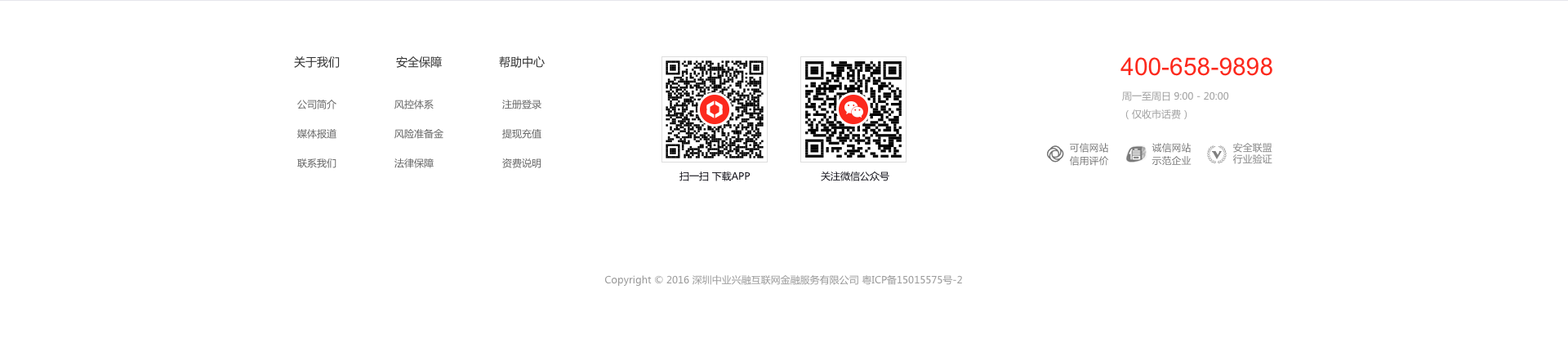
<style>
.page{position:relative;width:1568px;height:343px;background:#ffffff}
.page>*{position:absolute;margin:0}
.t1{font:11.4px "MicrosoftYaHei";color:#333333}
.t2{font:24.5px "ArialMT";color:#fc291d}
.t3{font:9.8px/29.4px "MicrosoftYaHei";color:#666666}
.t4{font:9.8px/18px "MicrosoftYaHei";color:#a0a0a0}
.t5{font:9.8px "MicrosoftYaHei";color:#121119}
.t6{font:9.8px "MicrosoftYaHei";color:#999999}
</style>
<div class="page">
<p class="t1" style="left:294px;top:56px;width:46px;height:12px">关于我们</p>
<p class="t1" style="left:396px;top:56px;width:46px;height:12px">安全保障</p>
<p class="t1" style="left:499px;top:56px;width:46px;height:12px">帮助中心</p>
<p class="t2" style="left:1120px;top:57px;width:152px;height:19px">400-658-9898</p>
<p class="t3" style="left:297px;top:100px;width:39px;height:68px">公司简介<br>媒体报道<br>联系我们</p>
<p class="t3" style="left:394px;top:100px;width:49px;height:68px">风控体系<br>风险准备金<br>法律保障</p>
<p class="t3" style="left:502px;top:100px;width:39px;height:68px">注册登录<br>提现充值<br>资费说明</p>
<p class="t4" style="left:1122px;top:91px;width:107px;height:29px">周一至周日 9:00 - 20:00<br>（仅收市话费）</p>
<p class="t5" style="left:679px;top:172px;width:72px;height:9px">扫一扫 下载APP</p>
<p class="t5" style="left:821px;top:172px;width:68px;height:9px">关注微信公众号</p>
<p class="t6" style="left:604px;top:275px;width:358px;height:11px">Copyright © 2016 深圳中业兴融互联网金融服务有限公司 粤ICP备15015575号-2</p>
</div>
